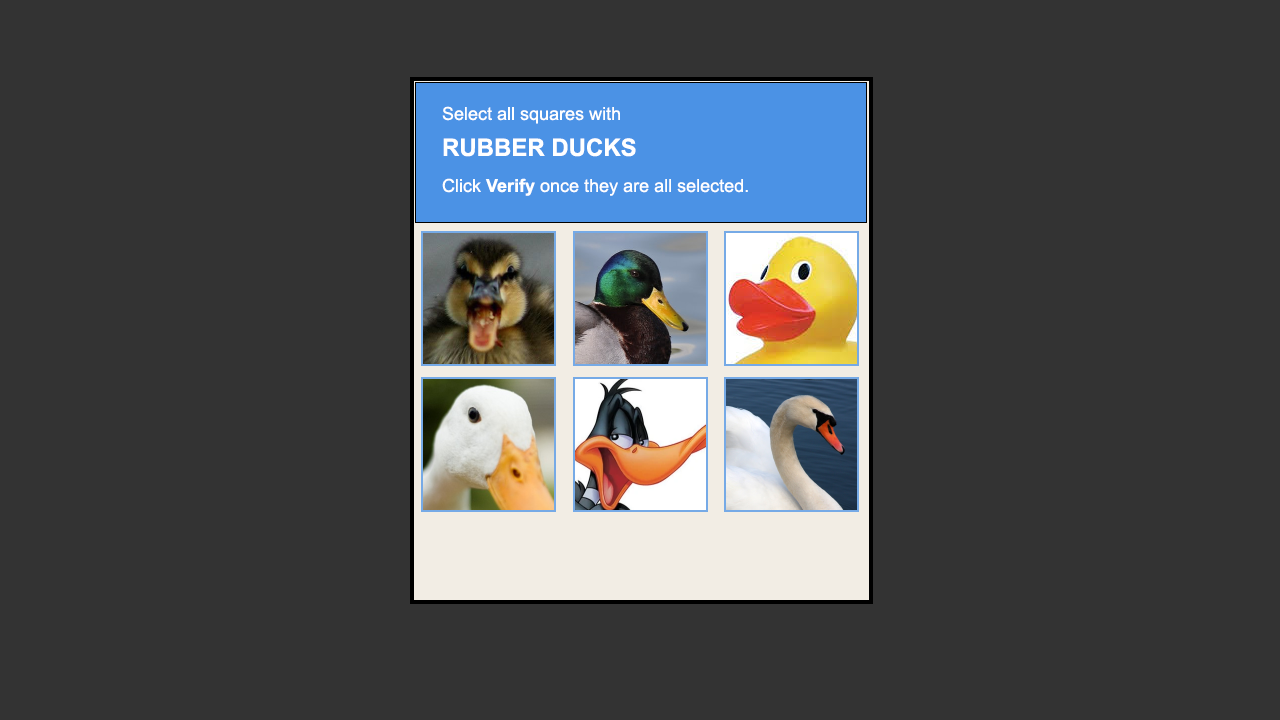
<style>
.page{position:relative;width:1280px;height:720px;background:#333333}
.page>*{position:absolute;margin:0}
.t1{font:18px/6px "ArialMT";color:#ffffff}
.t2{font:24px/6px "Arial-BoldMT";color:#ffffff}
.t3{font:18px/6px "Arial-BoldMT";color:#ffffff}
</style>
<div class="page">
<p class="t1" style="left:442px;top:106px;width:306px;height:90px">Select all squares with <br><span class="t2">RUBBER DUCKS <br></span>Click <span class="t3">Verify</span> once they are all selected.</p>
</div>
